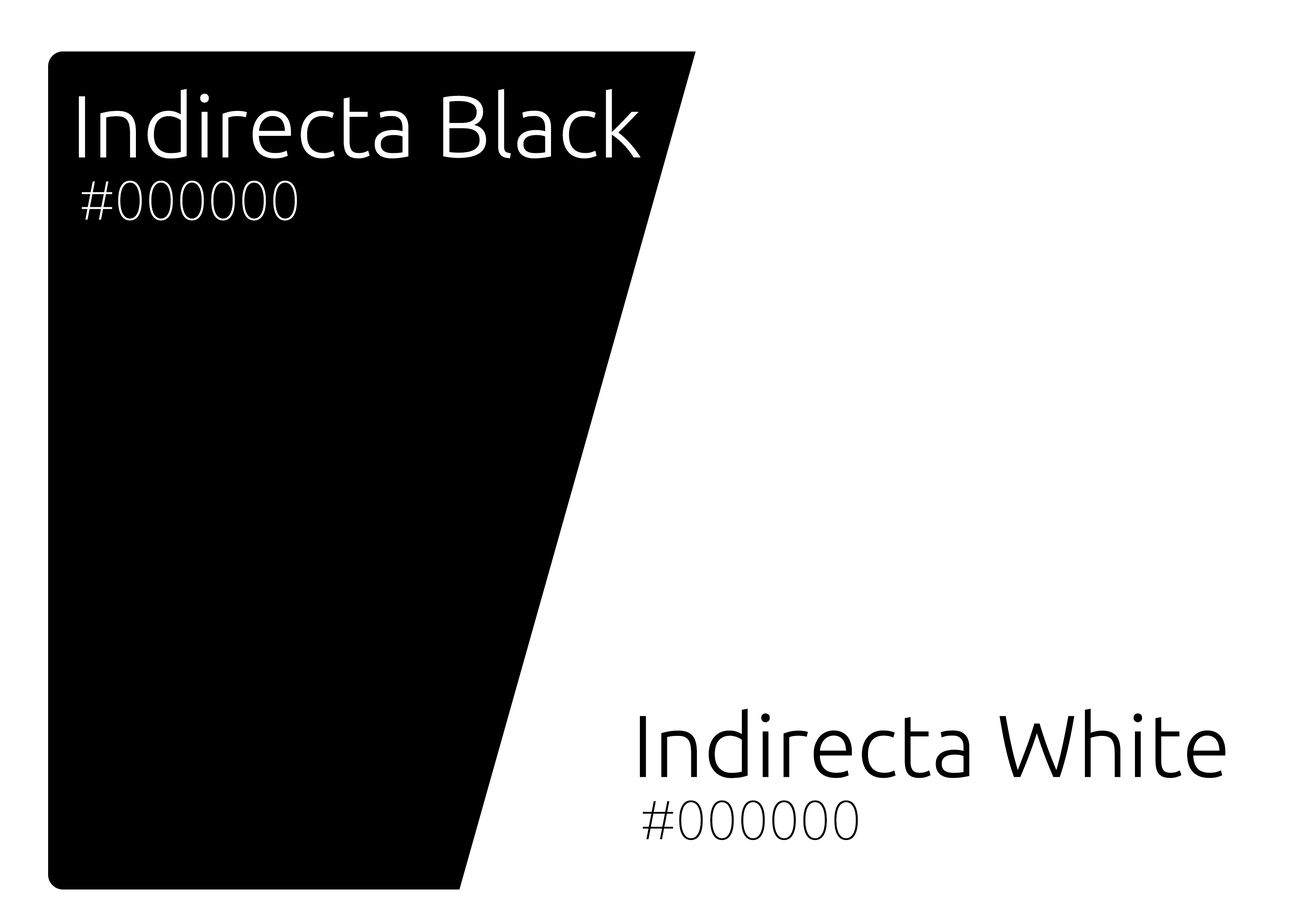
<style>
.page{position:relative;width:1299px;height:918px;background:#ffffff}
.page>*{position:absolute;margin:0}
.t1{font:87.9px "Ubuntu-Light";color:#ffffff}
.t2{font:55px "Ubuntu-Thin";color:#ffffff}
.t3{font:87.9px "Ubuntu-Light";color:#000000}
.t4{font:55px "Ubuntu-Thin";color:#000000}
</style>
<div class="page">
<p class="t1" style="left:79px;top:89px;width:561px;height:69px">Indirecta Black</p>
<p class="t2" style="left:82px;top:181px;width:215px;height:40px">#000000</p>
<p class="t3" style="left:640px;top:709px;width:585px;height:69px">Indirecta White</p>
<p class="t4" style="left:643px;top:800px;width:215px;height:40px">#000000</p>
</div>
